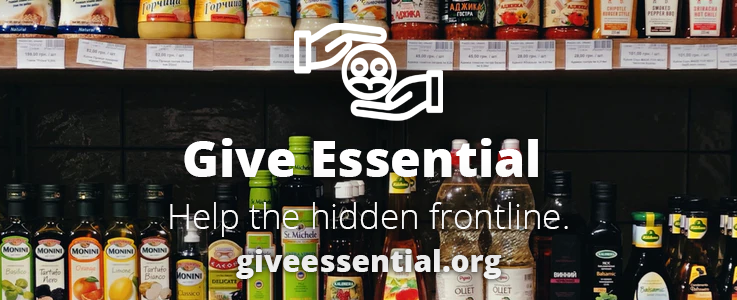
<style>
.page{position:relative;width:737px;height:300px}
.page>*{position:absolute;margin:0}
.t1{font:50px "OpenSans-ExtraBold";color:#ffffff}
.t2{font:35px "OpenSans-Light";color:#ffffff}
.t3{font:30px "OpenSans-ExtraBold";color:#ffffff}
</style>
<div class="page">
<p class="t1" style="left:184px;top:138px;width:354px;height:39px">Give Essential</p>
<p class="t2" style="left:170px;top:202px;width:398px;height:35px">Help the hidden frontline.</p>
<p class="t3" style="left:236px;top:249px;width:266px;height:30px">giveessential.org</p>
</div>
